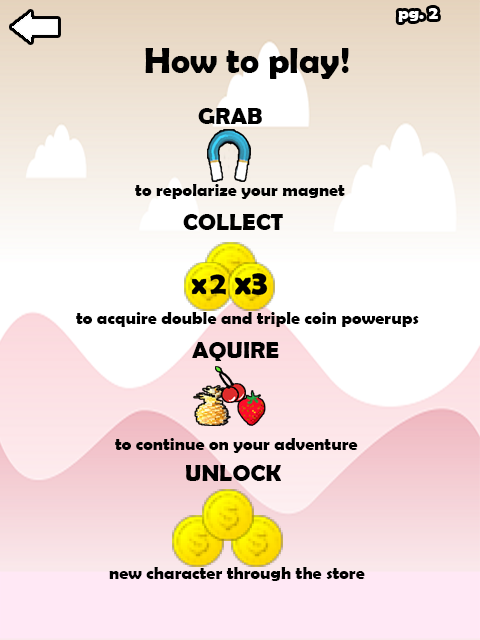
<style>
.page{position:relative;width:480px;height:640px}
.page>*{position:absolute;margin:0}
.t1{font:18px "BerlinSansFBDemi-Bold";color:#ffffff}
.t2{font:36px "BerlinSansFBDemi-Bold";color:#000000}
.t3{font:18px "BerlinSansFBDemi-Bold";color:#000000}
.t4{font:24px "BerlinSansFBDemi-Bold";color:#000000}
</style>
<div class="page">
<p class="t1" style="left:398px;top:8px;width:40px;height:14px">pg. 2</p>
<p class="t2" style="left:145px;top:48px;width:204px;height:31px">How to play!</p>
<p class="t3" style="left:135px;top:108px;width:210px;height:91px"><span class="t4">     GRAB <br><br></span><br>         to repolarize your magnet</p>
<p class="t4" style="left:183px;top:214px;width:100px;height:16px">COLLECT</p>
<p class="t3" style="left:76px;top:312px;width:343px;height:15px">to acquire double and triple coin powerups</p>
<p class="t4" style="left:192px;top:342px;width:87px;height:19px">AQUIRE</p>
<p class="t3" style="left:115px;top:438px;width:243px;height:15px">to continue on your adventure</p>
<p class="t4" style="left:186px;top:465px;width:95px;height:16px">UNLOCK</p>
<p class="t3" style="left:109px;top:567px;width:256px;height:14px">new character through the store</p>
</div>
